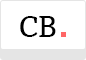
<style>
.page{position:relative;width:86px;height:60px;background:#ffffff}
.page>*{position:absolute;margin:0}
.t1{font:30px "Bitter-Regular";letter-spacing:-0.01em;color:#000000;text-transform:uppercase}
</style>
<div class="page">
<p class="t1" style="left:20px;top:16px;width:36px;height:21px">CB</p>
</div>
